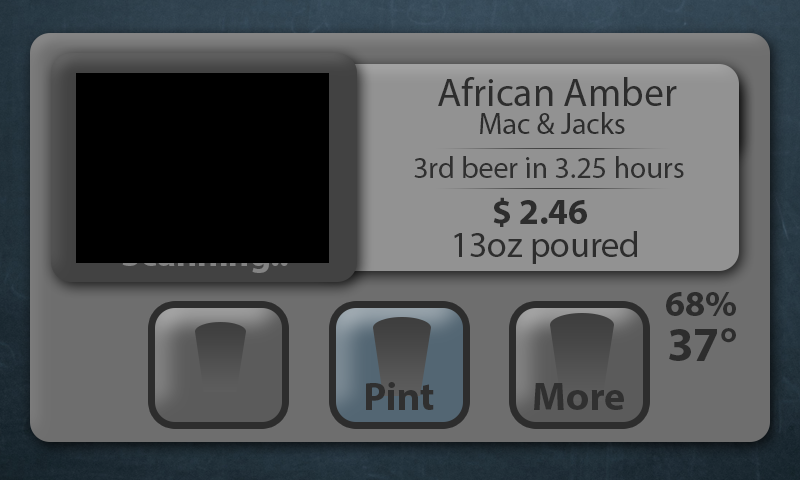
<style>
.page{position:relative;width:800px;height:480px}
.page>*{position:absolute;margin:0}
.t1{font:40px "MyriadPro-Regular";color:#2d2d2d}
.t2{font:30px "MyriadPro-Regular";color:#2d2d2d}
.t3{font:30px "MyriadPro-Regular";color:#303030}
.t4{font:36px "MyriadPro-Bold";color:#2d2d2d}
.t5{font:36px "MyriadPro-Regular";color:#2d2d2d}
.t6{font:48px "MyriadPro-Bold";color:#2d2d2d}
.t7{font:40px "MyriadPro-Bold";color:#303030}
</style>
<div class="page">
<p class="t1" style="left:438px;top:77px;width:239px;height:29px">African Amber</p>
<p class="t2" style="left:480px;top:112px;width:145px;height:22px">Mac &amp; Jacks</p>
<p class="t3" style="left:414px;top:156px;width:270px;height:22px">3rd beer in 3.25 hours</p>
<p class="t4" style="left:493px;top:197px;width:94px;height:30px">$ 2.46</p>
<p class="t5" style="left:454px;top:231px;width:183px;height:33px">13oz poured</p>
<p class="t4" style="left:666px;top:292px;width:70px;height:24px">68%</p>
<p class="t6" style="left:669px;top:328px;width:67px;height:33px">37°</p>
<p class="t7" style="left:366px;top:382px;width:68px;height:28px">Pint</p>
<p class="t7" style="left:534px;top:383px;width:90px;height:27px">More</p>
</div>
